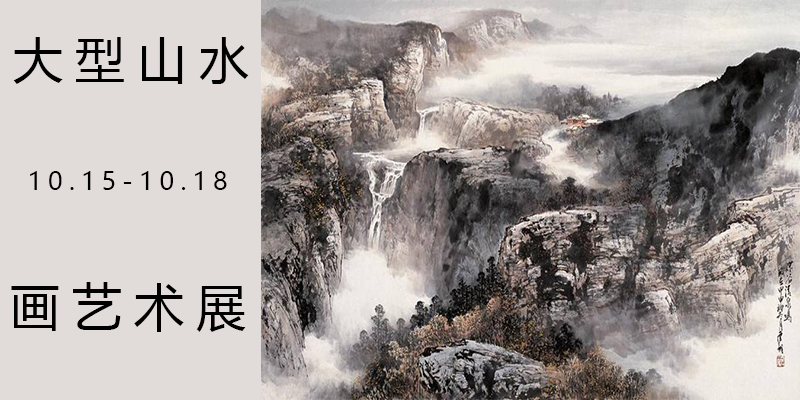
<style>
.page{position:relative;width:800px;height:400px;background:#e1dcd9}
.page>*{position:absolute;margin:0}
.t1{font:50px "MicrosoftYaHei";letter-spacing:0.24em;color:#000000}
.t2{font:25px "MicrosoftYaHei";letter-spacing:0.24em;color:#000000}
</style>
<div class="page">
<p class="t1" style="left:13px;top:37px;width:236px;height:47px">大型山水</p>
<p class="t2" style="left:30px;top:171px;width:197px;height:19px">10.15-10.18</p>
<p class="t1" style="left:11px;top:282px;width:235px;height:50px">画艺术展</p>
</div>
